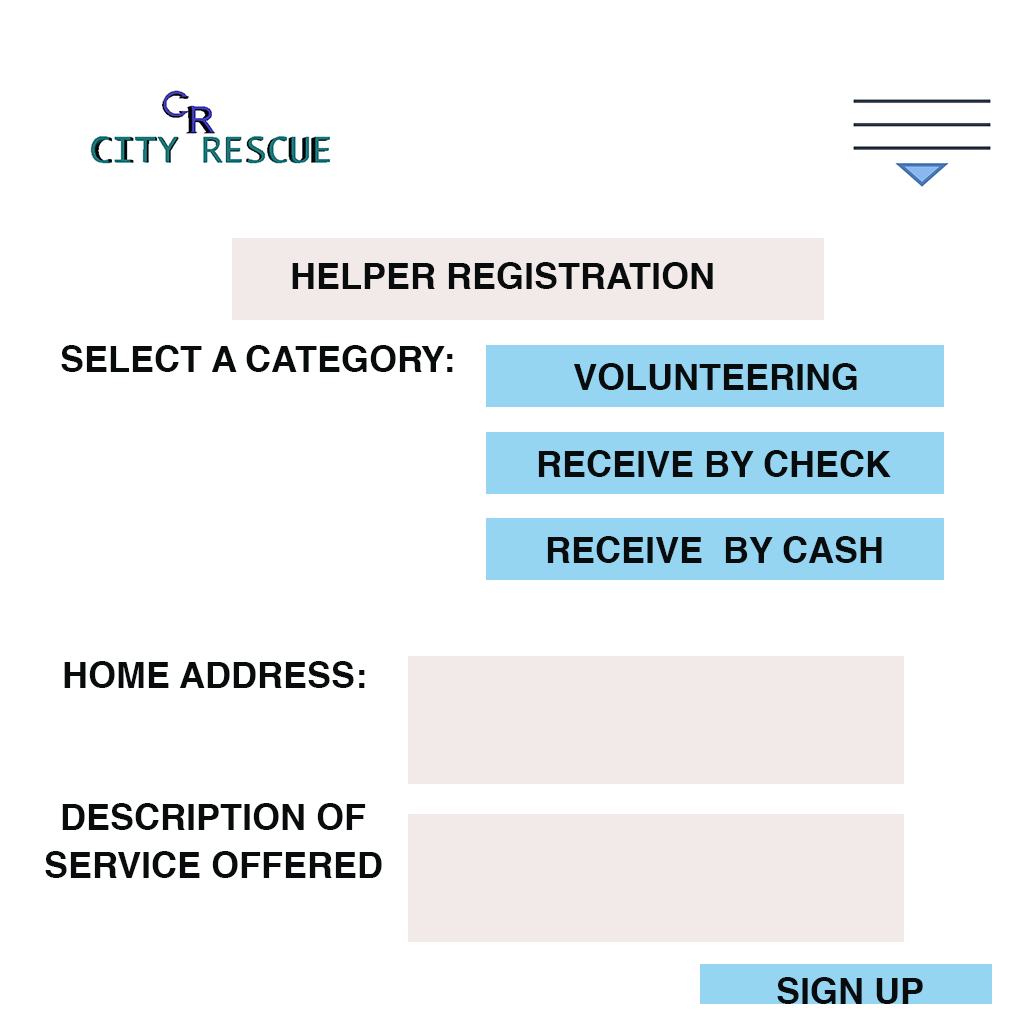
<style>
.page{position:relative;width:1024px;height:1024px;background:#ffffff}
.page>*{position:absolute;margin:0}
.t1{font:36px "Helvetica-Bold";color:#090c0d;text-transform:uppercase}
</style>
<div class="page">
<p class="t1" style="left:292px;top:262px;width:421px;height:27px">helper registration</p>
<p class="t1" style="left:61px;top:345px;width:392px;height:27px">select a category:</p>
<p class="t1" style="left:574px;top:363px;width:283px;height:27px">volunteering</p>
<p class="t1" style="left:538px;top:450px;width:353px;height:27px">receive by check</p>
<p class="t1" style="left:547px;top:536px;width:335px;height:27px">receive  by cash</p>
<p class="t1" style="left:64px;top:661px;width:301px;height:27px">home address:</p>
<p class="t1" style="left:62px;top:803px;width:304px;height:27px">description of</p>
<p class="t1" style="left:45px;top:851px;width:337px;height:27px">service offered</p>
<p class="t1" style="left:777px;top:977px;width:146px;height:27px">sign up</p>
</div>
